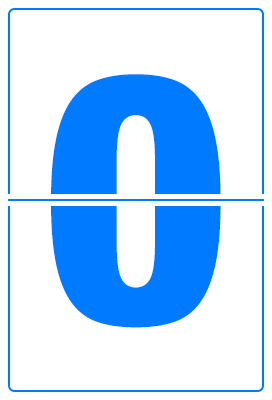
<style>
.page{position:relative;width:272px;height:400px;background:#ffffff}
.page>*{position:absolute;margin:0}
.t1{font:352px "HelveticaNeue-CondensedBlack";letter-spacing:0.05em;color:#007aff;text-transform:uppercase}
</style>
<div class="page">
<p class="t1" style="left:51px;top:74px;width:170px;height:254px">0</p>
</div>
